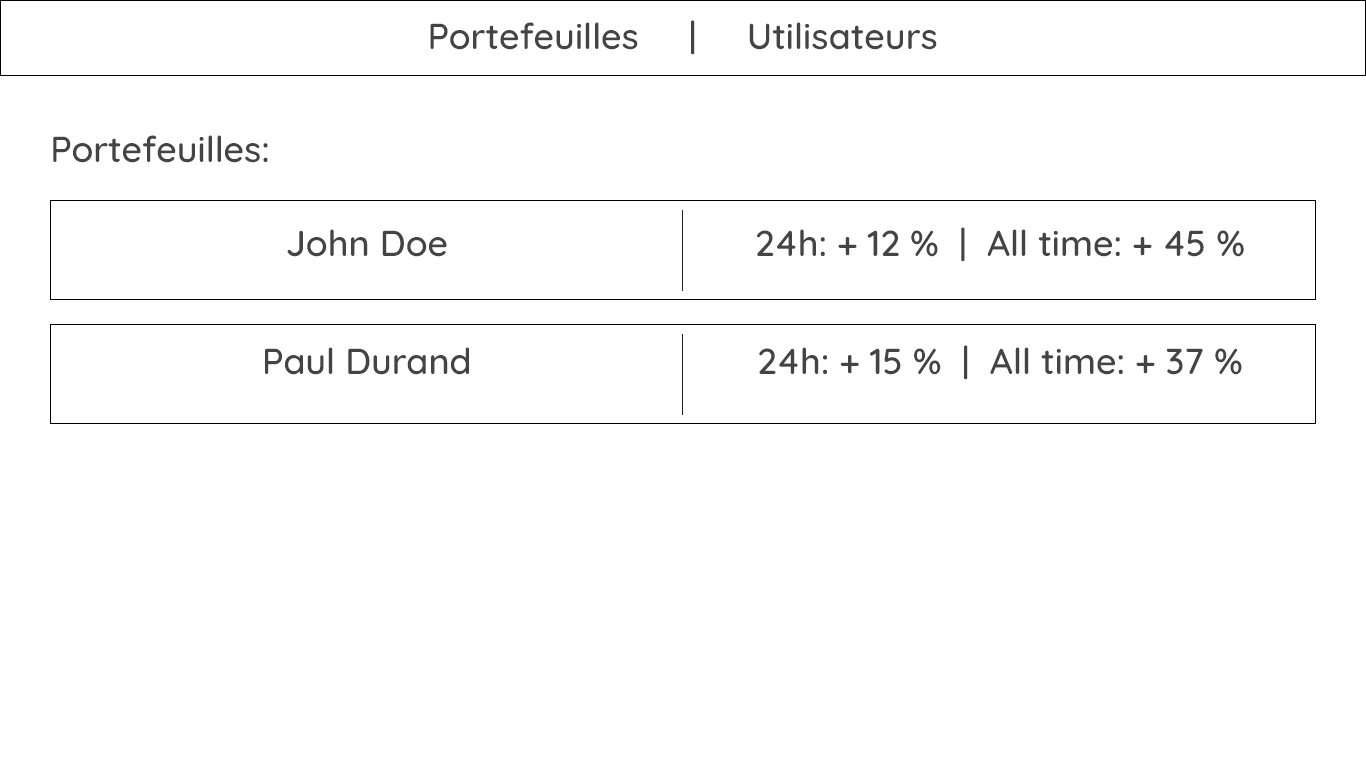
<style>
.page{position:relative;width:1366px;height:768px;background:#ffffff}
.page>*{position:absolute;margin:0}
.t1{font:36px "Quicksand-Medium";color:#444444}
</style>
<div class="page">
<p class="t1" style="left:430px;top:20px;width:507px;height:35px">Portefeuilles     |     Utilisateurs</p>
<p class="t1" style="left:53px;top:135px;width:215px;height:28px">Portefeuilles:</p>
<p class="t1" style="left:287px;top:229px;width:160px;height:28px">John Doe</p>
<p class="t1" style="left:757px;top:227px;width:487px;height:35px">24h: + 12 %  |  All time: + 45 %</p>
<p class="t1" style="left:265px;top:347px;width:204px;height:28px">Paul Durand</p>
<p class="t1" style="left:759px;top:345px;width:483px;height:35px">24h: + 15 %  |  All time: + 37 %</p>
</div>
